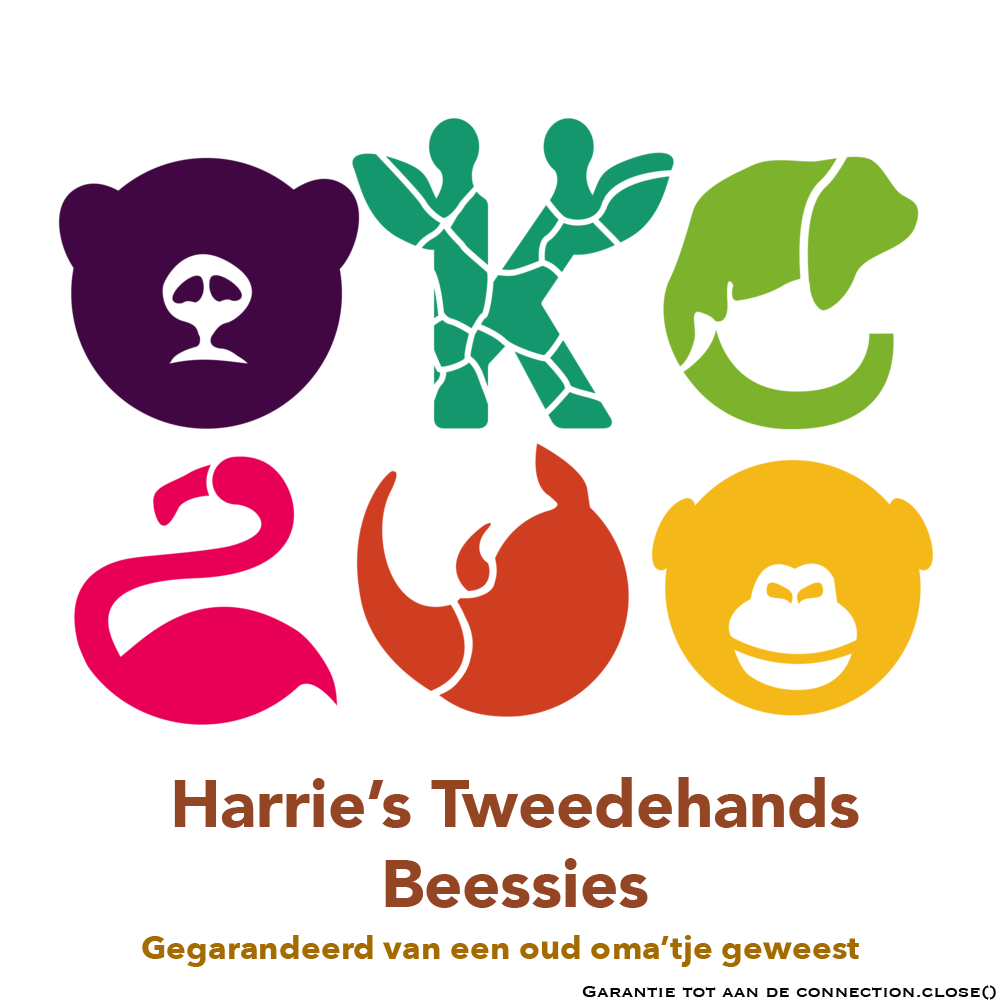
<style>
.page{position:relative;width:1000px;height:1000px;background:#ffffff}
.page>*{position:absolute;margin:0}
.t1{font:66.7px "Avenir-Black";color:#944523}
.t2{font:33.3px "AvenirNext-Bold";color:#a46b01}
.t3{font:20.8px "Copperplate";color:#020100}
</style>
<div class="page">
<p class="t1" style="left:174px;top:777px;width:685px;height:131px;text-align:center">Harrie’s Tweedehands<br>Beessies</p>
<p class="t2" style="left:142px;top:935px;width:717px;height:32px">Gegarandeerd van een oud oma’tje geweest</p>
<p class="t3" style="left:582px;top:985px;width:414px;height:15px">Garantie tot aan de connection.close()</p>
</div>
